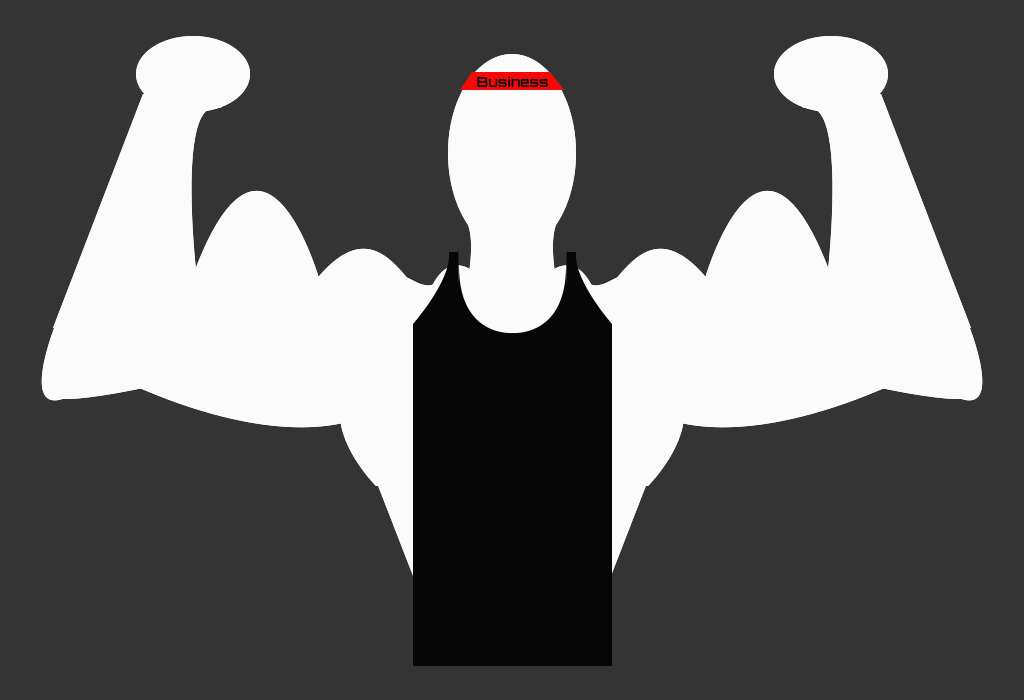
<style>
.page{position:relative;width:1024px;height:700px;background:#353434}
.page>*{position:absolute;margin:0}
.t1{font:14px "Orbitron-Bold";color:#040404}
</style>
<div class="page">
<p class="t1" style="left:477px;top:76px;width:72px;height:12px">Business</p>
</div>
